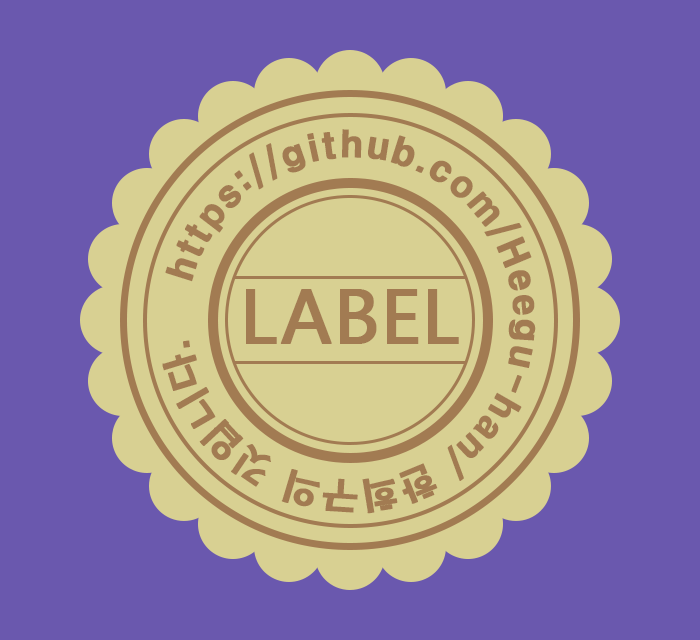
<style>
.page{position:relative;width:700px;height:640px;background:#6a58ae}
.page>*{position:absolute;margin:0}
.t1{font:32.3px "Gulim";color:#a27b52;font-weight:bold}
.t2{font:36px "H2gtrE";color:#a27b52;font-weight:bold}
.t3{font:32.3px "MyriadPro-Regular";color:#a27b52;font-weight:bold}
.t4{font:72px "MicrosoftYaHeiUI";color:#a27b52;font-weight:bold}
</style>
<div class="page">
<p class="t1" style="left:162px;top:129px;width:374px;height:385px"><span class="t2">https://github.com/Heegu-han/ 한희구의 깃입니다. </span><span class="t3">https://github.com/Heegu-han</span> https://github.com/Heegu-hanhttps://github.com/Heegu-han</p>
<p class="t4" style="left:246px;top:289px;width:213px;height:55px">LABEL</p>
</div>
